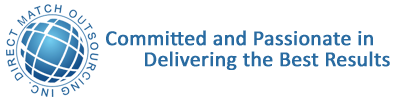
<style>
.page{position:relative;width:400px;height:100px;background:#ffffff}
.page>*{position:absolute;margin:0}
.t1{font:21.4px "Calibri";color:#296ba1;font-weight:bold}
</style>
<div class="page">
<p class="t1" style="left:106px;top:30px;width:267px;height:16px">Committed and Passionate in</p>
<p class="t1" style="left:145px;top:51px;width:245px;height:19px">Delivering the Best Results</p>
</div>
